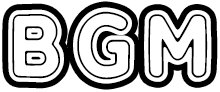
<style>
.page{position:relative;width:220px;height:92px;background:#ffffff}
.page>*{position:absolute;margin:0}
.t1{font:100px "DokiDokiFantasia";letter-spacing:0.05em;color:#ffffff}
</style>
<div class="page">
<p class="t1" style="left:8px;top:7px;width:204px;height:77px">BGM</p>
</div>
